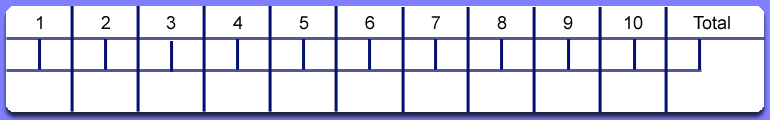
<style>
.page{position:relative;width:770px;height:120px;background:#ffffff}
.page>*{position:absolute;margin:0}
.t1{font:18px "ArialMT";color:#020202}
</style>
<div class="page">
<p class="t1" style="left:37px;top:16px;width:5px;height:13px">1</p>
<p class="t1" style="left:101px;top:16px;width:9px;height:13px">2</p>
<p class="t1" style="left:166px;top:16px;width:10px;height:14px">3</p>
<p class="t1" style="left:233px;top:16px;width:10px;height:13px">4</p>
<p class="t1" style="left:299px;top:16px;width:10px;height:14px">5</p>
<p class="t1" style="left:365px;top:16px;width:10px;height:14px">6</p>
<p class="t1" style="left:431px;top:16px;width:9px;height:13px">7</p>
<p class="t1" style="left:497px;top:16px;width:10px;height:14px">8</p>
<p class="t1" style="left:563px;top:16px;width:10px;height:14px">9</p>
<p class="t1" style="left:625px;top:16px;width:18px;height:14px">10</p>
<p class="t1" style="left:693px;top:16px;width:37px;height:14px">Total</p>
</div>
